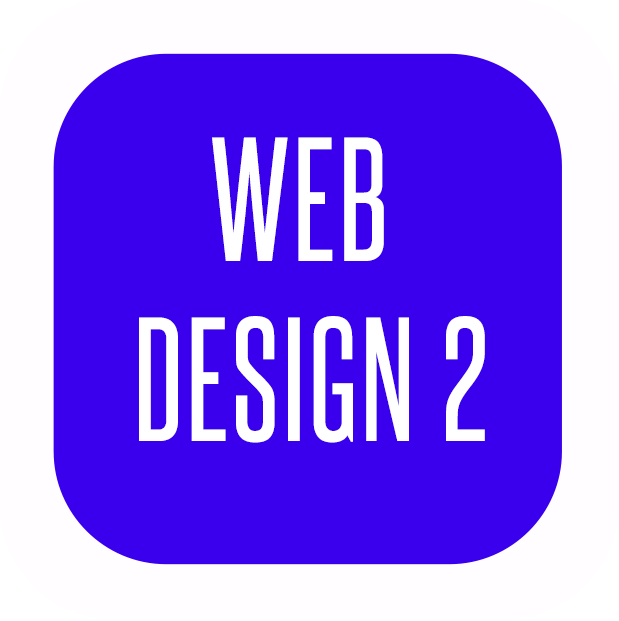
<style>
.page{position:relative;width:619px;height:621px;background:#3a00ed}
.page>*{position:absolute;margin:0}
.t1{font:150px "SteelfishRg-Regular";letter-spacing:0.025em;color:#ffffff}
</style>
<div class="page">
<p class="t1" style="left:139px;top:137px;width:346px;height:306px;text-align:center">WEB <br>DESIGN 2</p>
</div>
